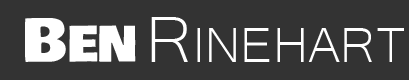
<style>
.page{position:relative;width:409px;height:80px;background:#333333}
.page>*{position:absolute;margin:0}
.t1{font:64.1px "Microsoft-Yi-Baiti";color:#ffffff}
.t2{font:84.3px "Microsoft-Yi-Baiti";color:#ffffff}
.t3{font:48px "BowlbyOne";color:#ffffff}
.t4{font:58.3px "BowlbyOne";color:#ffffff}
</style>
<div class="page">
<p class="t1" style="left:151px;top:17px;width:253px;height:45px"><span class="t2">R</span>INEHART</p>
<p class="t3" style="left:25px;top:18px;width:111px;height:44px"><span class="t4">B</span>EN</p>
</div>
